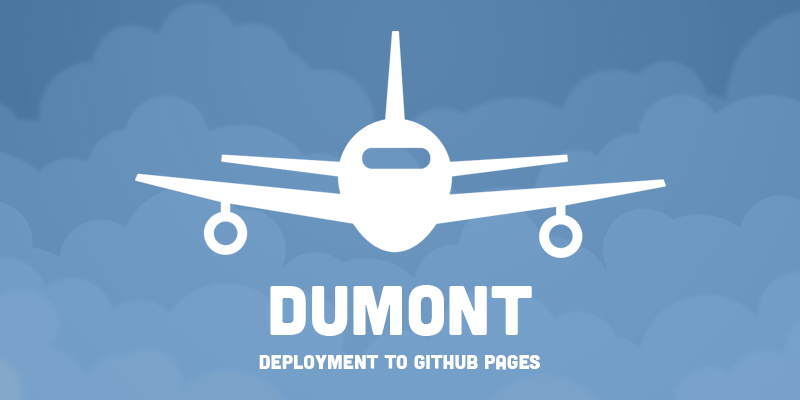
<style>
.page{position:relative;width:800px;height:400px}
.page>*{position:absolute;margin:0}
.t1{font:70px "Cubano-Regular";color:#ffffff;text-transform:uppercase}
.t2{font:20px "Cubano-Regular";color:#ffffff;text-transform:uppercase}
</style>
<div class="page">
<p class="t1" style="left:270px;top:285px;width:262px;height:51px">DUMONT</p>
<p class="t2" style="left:259px;top:355px;width:281px;height:15px">Deployment to GitHub Pages</p>
</div>
